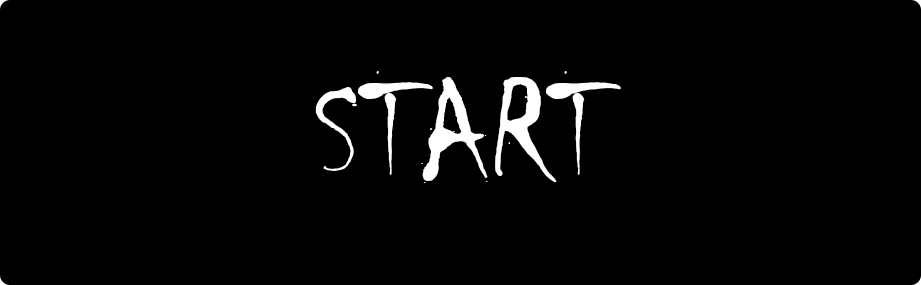
<style>
.page{position:relative;width:921px;height:285px;background:#000000}
.page>*{position:absolute;margin:0}
.t1{font:141.7px "Chiller-Regular";color:#ffffff}
</style>
<div class="page">
<p class="t1" style="left:315px;top:71px;width:306px;height:112px">START</p>
</div>
